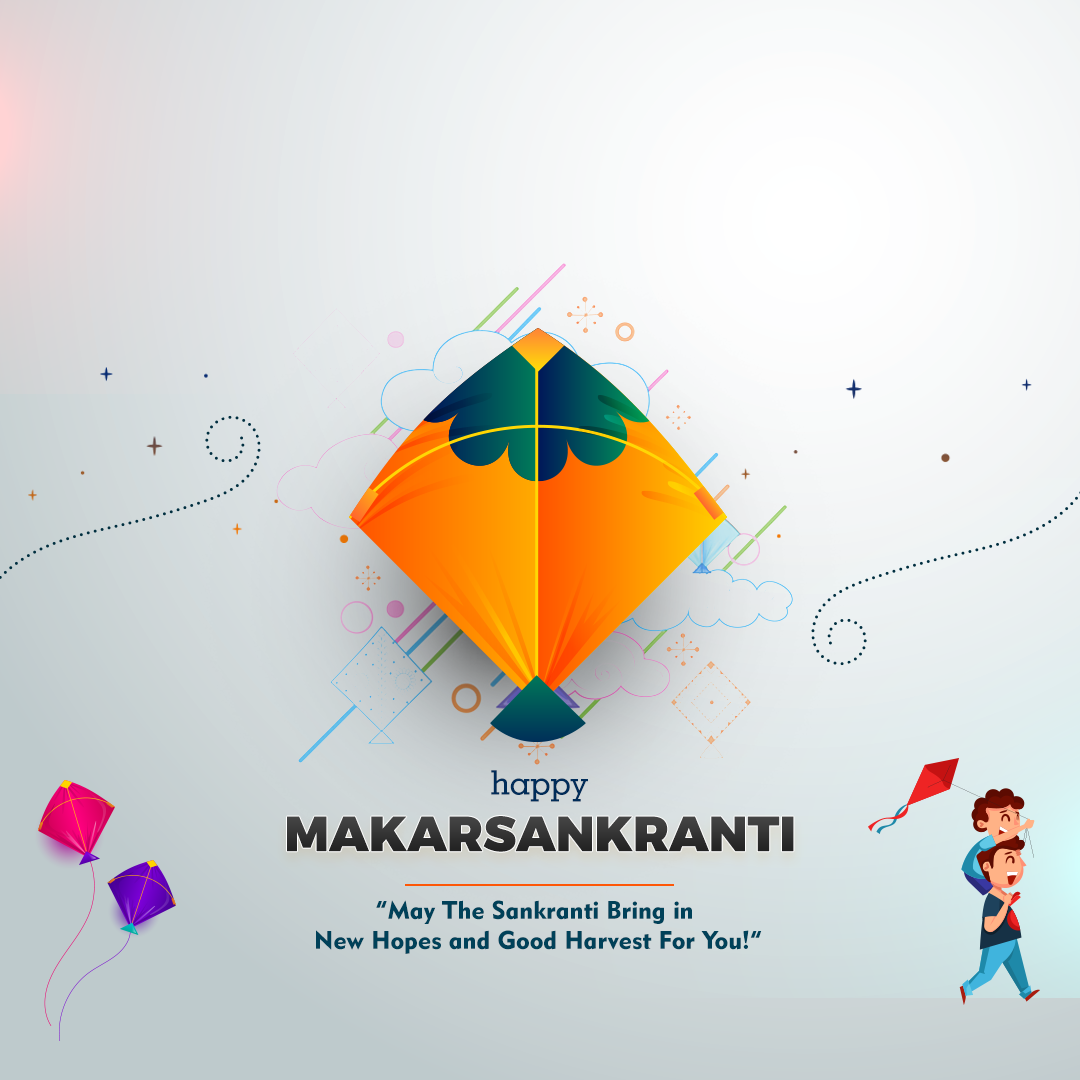
<style>
.page{position:relative;width:1080px;height:1080px}
.page>*{position:absolute;margin:0}
.t1{font:33.8px "GeometricSlab703BT-Medium";color:#002c59}
.t2{font:49.7px "Montserrat-Black";color:#242426;text-transform:uppercase}
.t3{font:25px "Geometric415BT-BlackA";color:#004159}
</style>
<div class="page">
<p class="t1" style="left:491px;top:770px;width:97px;height:32px">happy</p>
<p class="t2" style="left:287px;top:816px;width:507px;height:36px">Makarsankranti</p>
<p class="t3" style="left:316px;top:900px;width:446px;height:54px;text-align:center">“May The Sankranti Bring in<br> New Hopes and Good Harvest For You!”</p>
</div>
